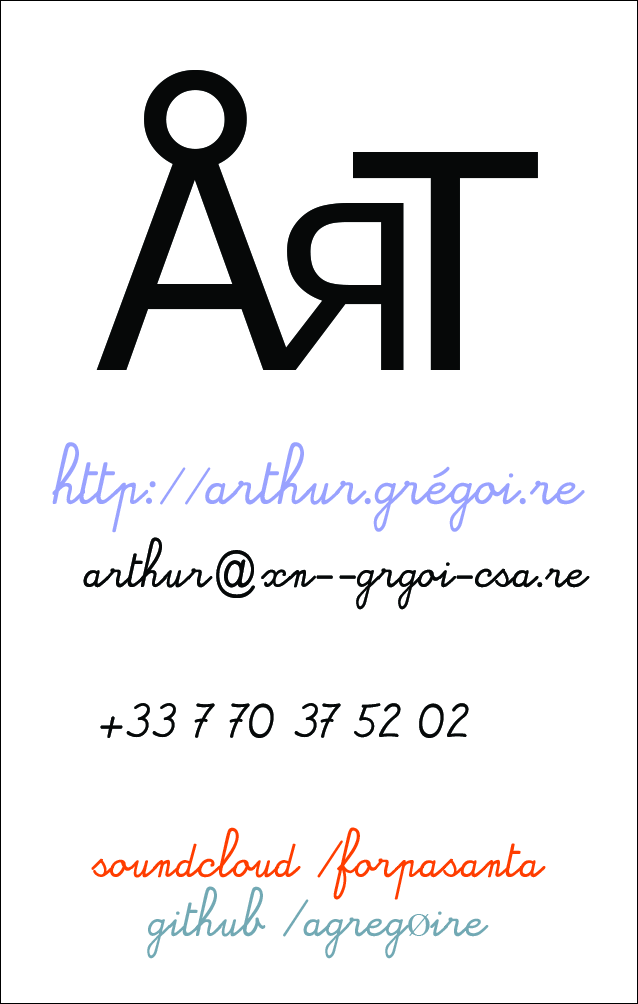
<style>
.page{position:relative;width:638px;height:1004px;background:#ffffff}
.page>*{position:absolute;margin:0}
.t1{font:33.3px/83.3px "Alamain";color:#060808}
.t2{font:58.3px "TimesNewRomanPSMT";color:#060808}
.t3{font:41.7px/83.3px "Alamain";color:#99a2ff}
.t4{font:25px/83.3px "Alamain";color:#99a2ff}
.t5{font:33.3px/50px "Alamain";color:#060808}
.t6{font:33.3px "Alamain";color:#ff3d00}
.t7{font:25px "Alamain";color:#ff3d00}
.t8{font:33.3px/58.3px "Alamain";color:#72a8b4}
.t9{font:25px/58.3px "Alamain";color:#72a8b4}
.t10{font:33.3px/58.3px "TimesNewRomanPSMT";color:#72a8b4}
</style>
<div class="page">
<p class="t1" style="left:52px;top:442px;width:538px;height:517px;text-align:center"><span class="t2">            <br>     <br>               <br>               <br>               </span><span class="t3">http:</span><span class="t4">//</span><span class="t3">arthur.grégoi.re<br>                </span>arthur@xn--grgoi-csa.re<br><br>              <br><span class="t5">             +33 7 70 37 52 02<br>    <br> <br></span><span class="t6">               <br>               soundcloud </span><span class="t7">/</span><span class="t6">forpasanta<br></span><span class="t8">               github </span><span class="t9">/</span><span class="t8">agreg</span><span class="t10">Ø</span><span class="t8">ire</span></p>
</div>
